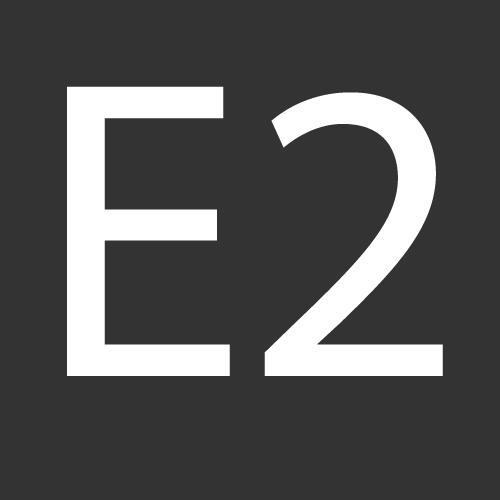
<style>
.page{position:relative;width:500px;height:500px;background:#333333}
.page>*{position:absolute;margin:0}
.t1{font:428.6px "MyriadPro-Regular";color:#ffffff}
</style>
<div class="page">
<p class="t1" style="left:67px;top:86px;width:376px;height:290px">E2</p>
</div>
